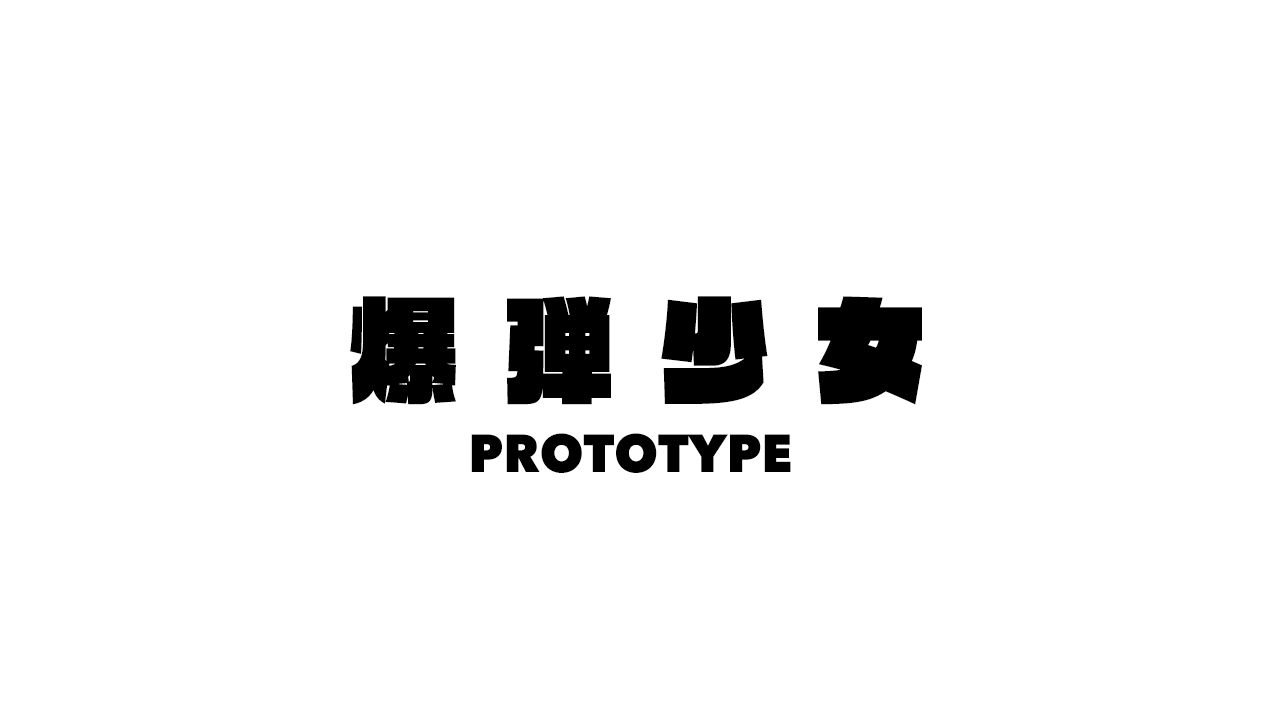
<style>
.page{position:relative;width:1280px;height:720px;background:#ffffff}
.page>*{position:absolute;margin:0}
.t1{font:53.1px "AvenirNext-Heavy";color:#000000;scale:0.96 1}
.t2{font:119.5px "RaglanStd-UB";color:#000000;scale:0.96 1}
</style>
<div class="page">
<p class="t1" style="left:350px;top:296px;width:572px;height:177px;text-align:center"><span class="t2">爆 弾 少 女<br></span>PROTOTYPE</p>
</div>
